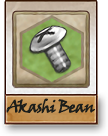
<style>
.page{position:relative;width:108px;height:136px}
.page>*{position:absolute;margin:0}
.t1{font:16px "VinerHandITC";letter-spacing:-0.08em;color:#1c1e1b;font-weight:bold}
</style>
<div class="page">
<p class="t1" style="left:6px;top:98px;width:89px;height:16px">Akashi Bean</p>
</div>
